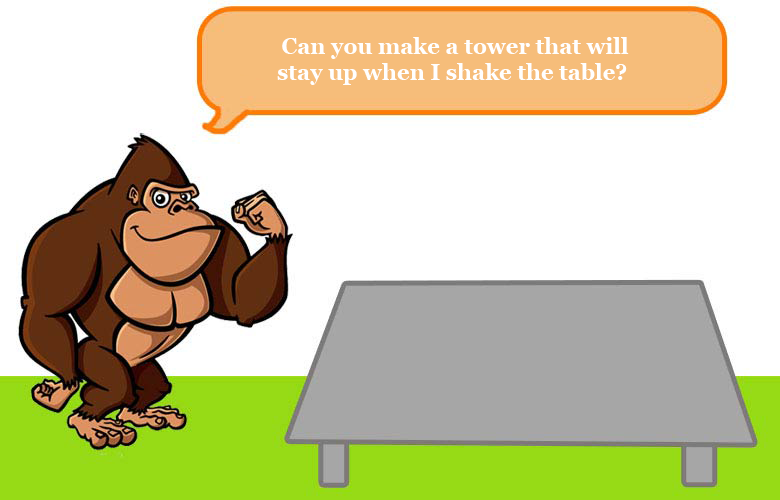
<style>
.page{position:relative;width:780px;height:500px;background:#ffffff}
.page>*{position:absolute;margin:0}
.t1{font:22px "Georgia-Bold";color:#ffffff}
</style>
<div class="page">
<p class="t1" style="left:277px;top:37px;width:352px;height:48px;text-align:center">Can you make a tower that will<br>stay up when I shake the table?</p>
</div>
